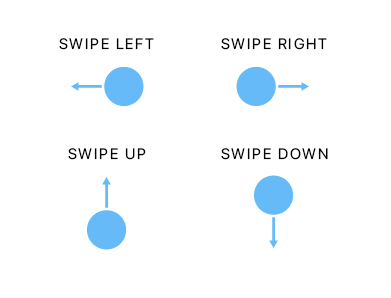
<style>
.page{position:relative;width:391px;height:298px;background:#ffffff}
.page>*{position:absolute;margin:0}
.t1{font:15px "SFDisplay-Regular";letter-spacing:0.12em;color:#020202}
</style>
<div class="page">
<p class="t1" style="left:59px;top:38px;width:95px;height:12px">SWIPE LEFT</p>
<p class="t1" style="left:221px;top:38px;width:106px;height:12px">SWIPE RIGHT</p>
<p class="t1" style="left:68px;top:148px;width:78px;height:12px">SWIPE UP</p>
<p class="t1" style="left:221px;top:148px;width:107px;height:12px">SWIPE DOWN</p>
</div>
